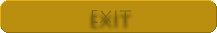
<style>
.page{position:relative;width:217px;height:33px;background:#ba8f10}
.page>*{position:absolute;margin:0}
.t1{font:18px "LithographLightPlain";color:#706216}
</style>
<div class="page">
<p class="t1" style="left:91px;top:10px;width:41px;height:14px">Exit</p>
</div>
